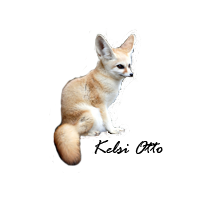
<style>
.page{position:relative;width:200px;height:200px;background:#ffffff}
.page>*{position:absolute;margin:0}
.t1{font:20px "RageItalic";color:#000000}
</style>
<div class="page">
<p class="t1" style="left:94px;top:140px;width:69px;height:14px">Kelsi Otto</p>
</div>
